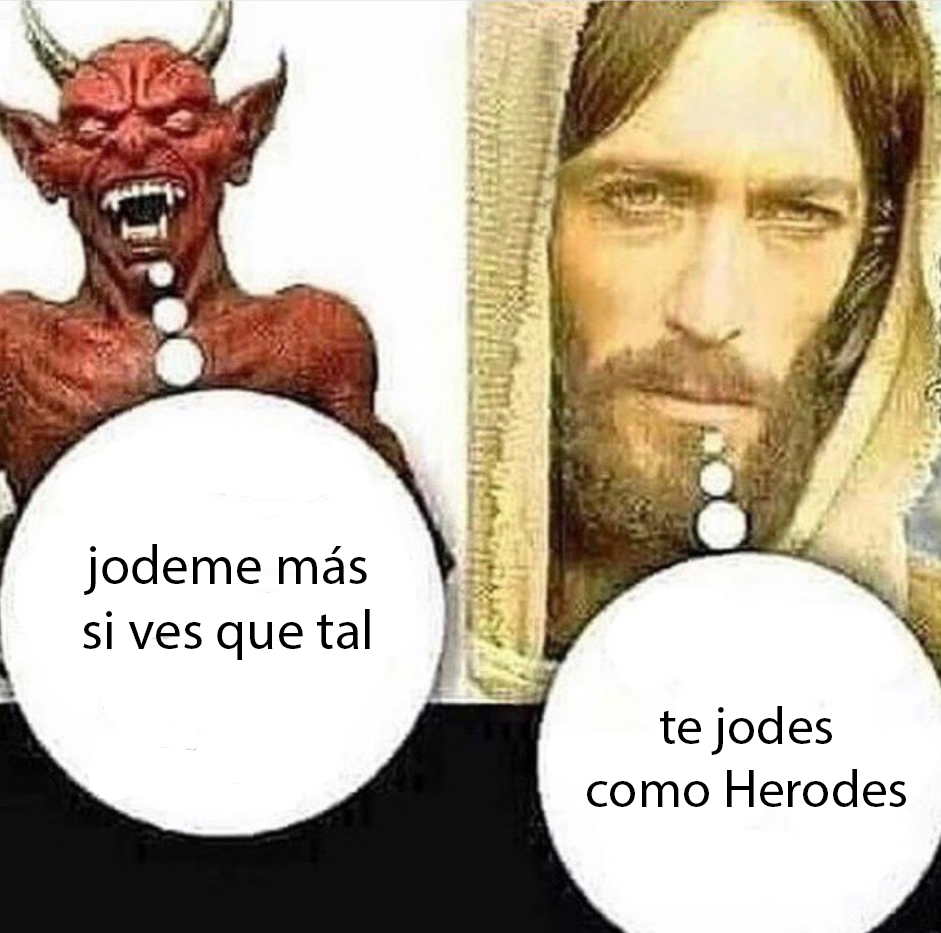
<style>
.page{position:relative;width:941px;height:933px;background:#ffffff}
.page>*{position:absolute;margin:0}
.t1{font:55.3px "MyriadPro-Regular";color:#000000}
.t2{font:53.4px "MyriadPro-Regular";color:#000000}
</style>
<div class="page">
<p class="t1" style="left:83px;top:544px;width:287px;height:116px;text-align:center">jodeme más<br>si ves que tal</p>
<p class="t2" style="left:587px;top:706px;width:319px;height:101px;text-align:center">te jodes<br>como Herodes</p>
</div>
